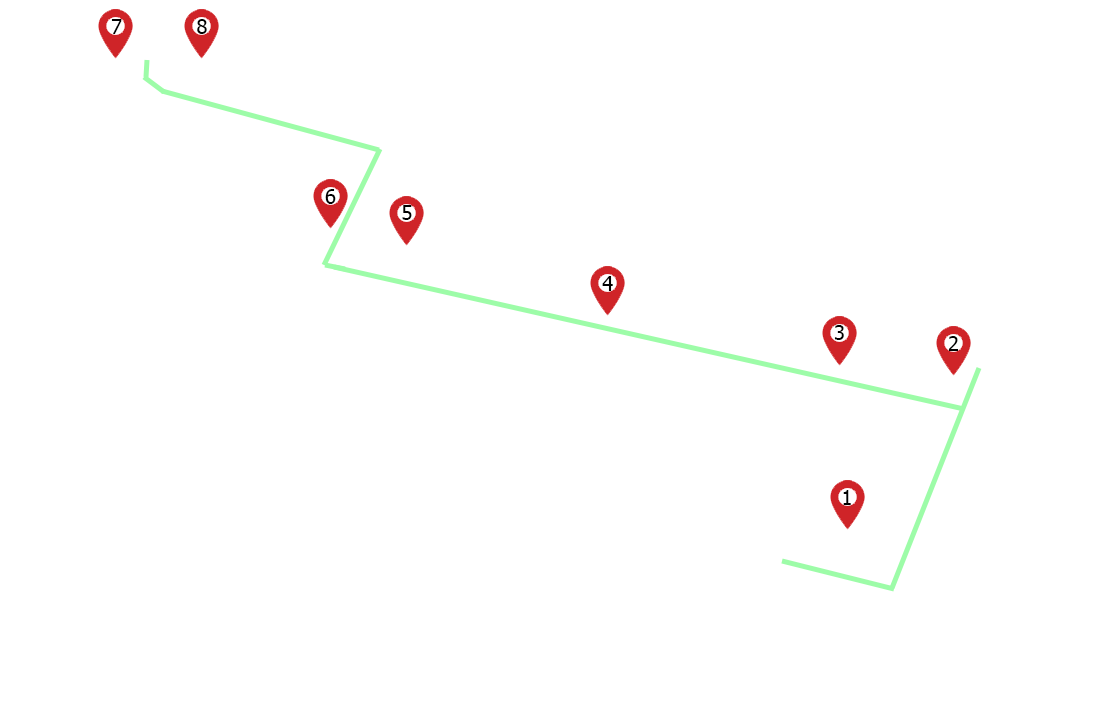
<style>
.page{position:relative;width:1113px;height:703px;background:#ffffff}
.page>*{position:absolute;margin:0}
.t1{font:20px "Tahoma";color:#000000}
</style>
<div class="page">
<p class="t1" style="left:111px;top:19px;width:11px;height:15px">7</p>
<p class="t1" style="left:197px;top:19px;width:10px;height:15px">8</p>
<p class="t1" style="left:325px;top:189px;width:11px;height:15px">6</p>
<p class="t1" style="left:402px;top:205px;width:10px;height:15px">5</p>
<p class="t1" style="left:602px;top:276px;width:11px;height:15px">4</p>
<p class="t1" style="left:834px;top:325px;width:10px;height:15px">3</p>
<p class="t1" style="left:948px;top:336px;width:11px;height:15px">2</p>
<p class="t1" style="left:843px;top:490px;width:8px;height:15px">1</p>
</div>
